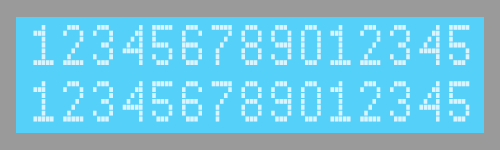
<style>
.page{position:relative;width:500px;height:150px;background:#55d0f8}
.page>*{position:absolute;margin:0}
.t1{font:47px "SubwayTicker";letter-spacing:0.18em;color:#d8f5ff;scale:0.7 1}
</style>
<div class="page">
<p class="t1" style="left:33px;top:25px;width:437px;height:97px">123456789012345<br>123456789012345</p>
</div>
